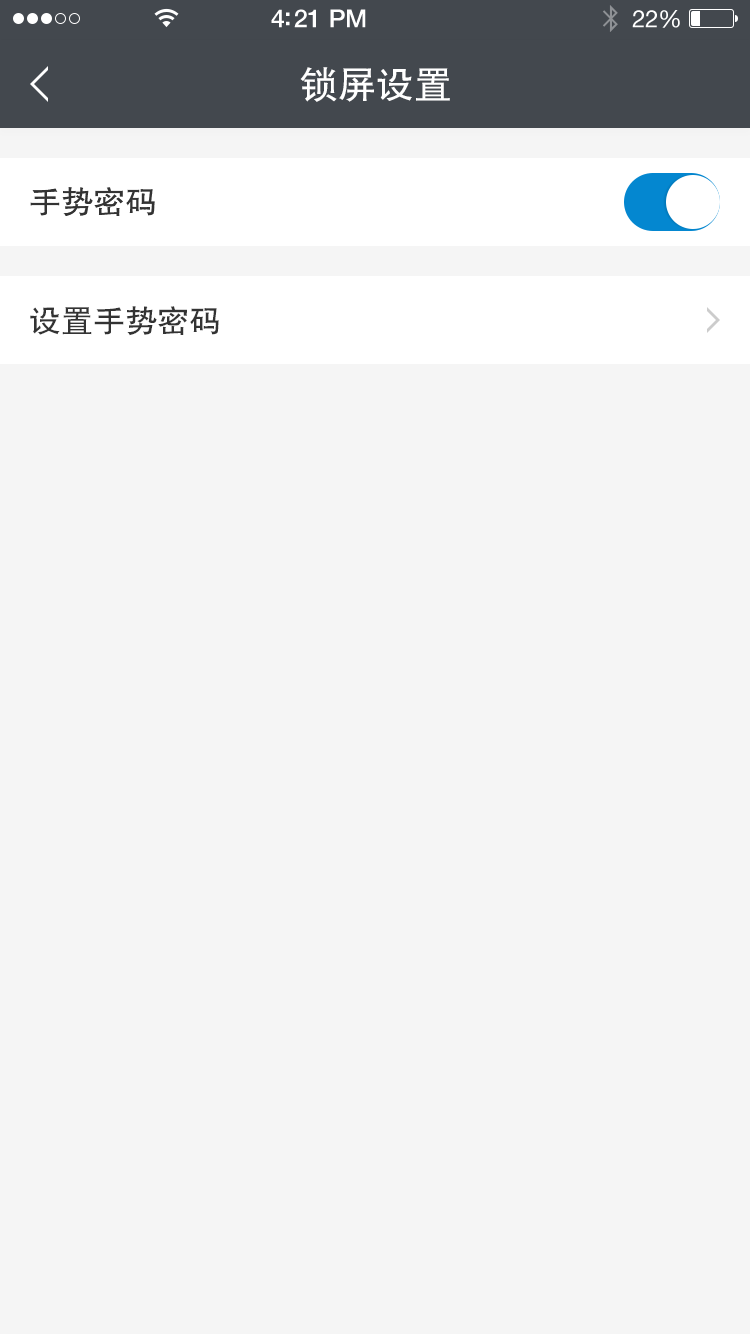
<style>
.page{position:relative;width:750px;height:1334px;background:#f5f5f5}
.page>*{position:absolute;margin:0}
.t1{font:38px "FZHTJW--GB1-0";color:#ffffff}
.t2{font:32px "FZHTJW--GB1-0";color:#333333}
.t3{font:32.1px "FZHTJW--GB1-0";color:#333333}
</style>
<div class="page">
<p class="t1" style="left:300px;top:67px;width:150px;height:35px">锁屏设置</p>
<p class="t2" style="left:30px;top:187px;width:125px;height:29px">手势密码</p>
<p class="t3" style="left:30px;top:306px;width:189px;height:30px">设置手势密码</p>
</div>
